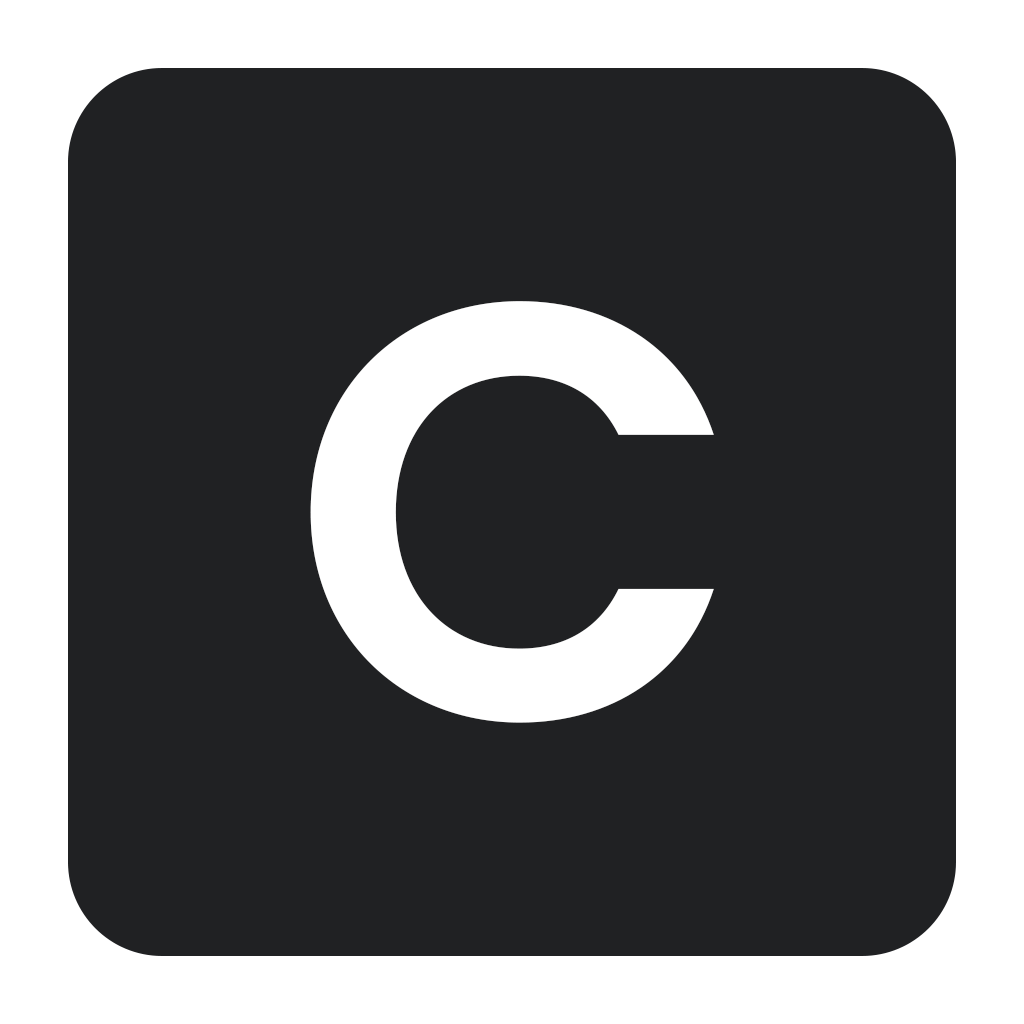
<style>
.page{position:relative;width:1024px;height:1024px;background:#202123}
.page>*{position:absolute;margin:0}
.t1{font:590.9px "Poppins-SemiBold";letter-spacing:-0.025em;color:#ffffff}
</style>
<div class="page">
<p class="t1" style="left:310px;top:301px;width:404px;height:422px">C</p>
</div>
